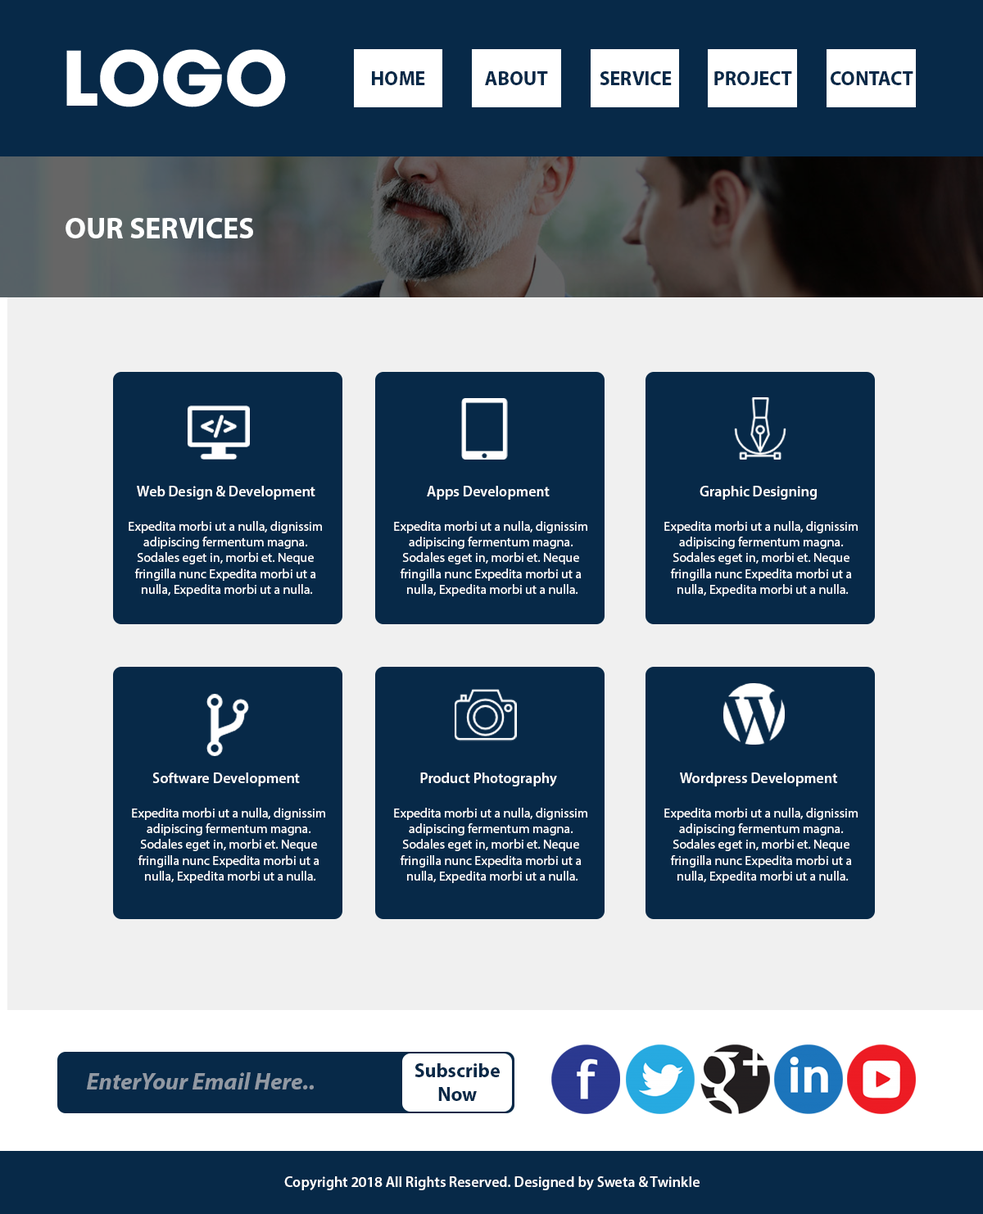
<style>
.page{position:relative;width:983px;height:1214px;background:#072948}
.page>*{position:absolute;margin:0}
.t1{font:19.7px "MyriadPro-Bold";color:#072948}
.t2{font:29.5px "MyriadPro-Bold";color:#feffff}
.t3{font:14.7px "MyriadPro-Semibold";color:#ffffff}
.t4{font:13.1px "MyriadPro-Regular";color:#ffffff}
.t5{font:23.7px "MyriadPro-BoldIt";color:#9199a3}
</style>
<div class="page">
<p class="t1" style="left:372px;top:71px;width:53px;height:14px">HOME</p>
<p class="t1" style="left:485px;top:71px;width:63px;height:14px">ABOUT</p>
<p class="t1" style="left:599px;top:71px;width:72px;height:14px">SERVICE</p>
<p class="t1" style="left:714px;top:71px;width:78px;height:14px">PROJECT</p>
<p class="t1" style="left:830px;top:71px;width:83px;height:14px">CONTACT</p>
<p class="t2" style="left:66px;top:218px;width:187px;height:20px">OUR SERVICES</p>
<p class="t3" style="left:137px;top:486px;width:178px;height:13px">Web Design &amp; Development</p>
<p class="t3" style="left:427px;top:486px;width:122px;height:13px">Apps Development</p>
<p class="t3" style="left:699px;top:486px;width:117px;height:13px">Graphic Designing</p>
<p class="t4" style="left:129px;top:521px;width:193px;height:75px;text-align:center">Expedita morbi ut a nulla, dignissim <br>adipiscing fermentum magna. <br>Sodales eget in, morbi et. Neque <br>fringilla nunc Expedita morbi ut a <br>nulla, Expedita morbi ut a nulla.</p>
<p class="t4" style="left:394px;top:521px;width:193px;height:75px;text-align:center">Expedita morbi ut a nulla, dignissim <br>adipiscing fermentum magna. <br>Sodales eget in, morbi et. Neque <br>fringilla nunc Expedita morbi ut a <br>nulla, Expedita morbi ut a nulla.</p>
<p class="t4" style="left:664px;top:521px;width:193px;height:75px;text-align:center">Expedita morbi ut a nulla, dignissim <br>adipiscing fermentum magna. <br>Sodales eget in, morbi et. Neque <br>fringilla nunc Expedita morbi ut a <br>nulla, Expedita morbi ut a nulla.</p>
<p class="t3" style="left:152px;top:772px;width:148px;height:14px">Software Development</p>
<p class="t3" style="left:420px;top:772px;width:137px;height:14px">Product Photography</p>
<p class="t3" style="left:680px;top:772px;width:157px;height:14px">Wordpress Development</p>
<p class="t4" style="left:132px;top:807px;width:193px;height:76px;text-align:center">Expedita morbi ut a nulla, dignissim <br>adipiscing fermentum magna. <br>Sodales eget in, morbi et. Neque <br>fringilla nunc Expedita morbi ut a <br>nulla, Expedita morbi ut a nulla.</p>
<p class="t4" style="left:394px;top:807px;width:193px;height:76px;text-align:center">Expedita morbi ut a nulla, dignissim <br>adipiscing fermentum magna. <br>Sodales eget in, morbi et. Neque <br>fringilla nunc Expedita morbi ut a <br>nulla, Expedita morbi ut a nulla.</p>
<p class="t4" style="left:664px;top:807px;width:193px;height:76px;text-align:center">Expedita morbi ut a nulla, dignissim <br>adipiscing fermentum magna. <br>Sodales eget in, morbi et. Neque <br>fringilla nunc Expedita morbi ut a <br>nulla, Expedita morbi ut a nulla.</p>
<p class="t5" style="left:87px;top:1072px;width:227px;height:17px">EnterYour Email Here..</p>
<p class="t1" style="left:414px;top:1063px;width:85px;height:38px;text-align:center">Subscribe<br>Now</p>
<p class="t3" style="left:284px;top:1176px;width:415px;height:14px">Copyright 2018 All Rights Reserved. Designed by Sweta &amp; Twinkle</p>
</div>
